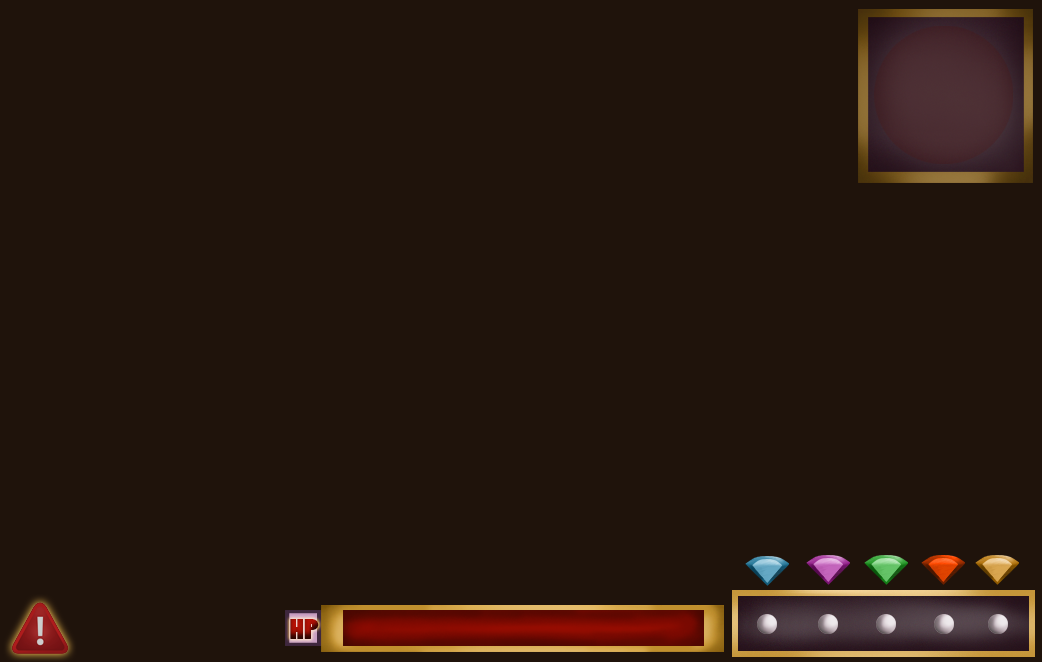
<style>
.page{position:relative;width:1042px;height:662px;background:#1f130b}
.page>*{position:absolute;margin:0}
.t1{font:26.1px "PoplarStd";scale:1.17 1}
</style>
<div class="page">
<p class="t1" style="left:290px;top:619px;width:29px;height:20px">HP</p>
</div>
